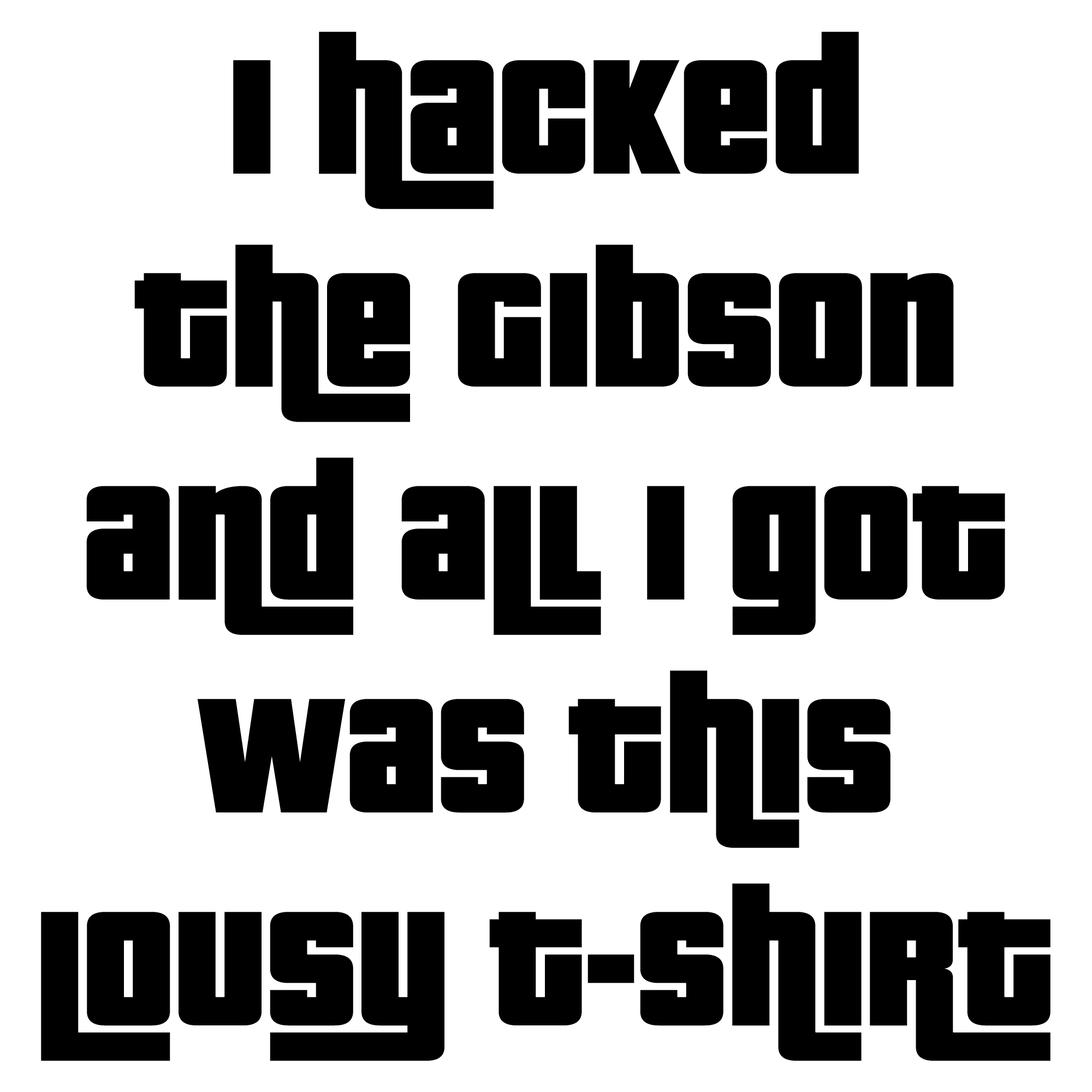
<style>
.page{position:relative;width:1092px;height:1092px;background:#ffffff}
.page>*{position:absolute;margin:0}
.t1{font:177.4px "PricedownBl-Regular";color:#000000}
</style>
<div class="page">
<p class="t1" style="left:41px;top:32px;width:1009px;height:1029px;text-align:center">I hacked<br>The Gibson<br>and all I got<br>was this<br>lousy t-shirt</p>
</div>
